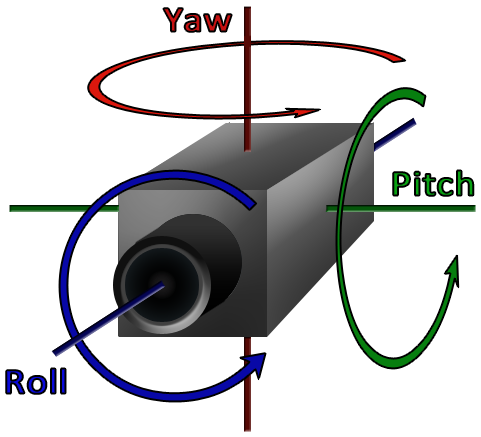
<style>
.page{position:relative;width:481px;height:437px;background:#ffffff}
.page>*{position:absolute;margin:0}
.t1{font:36px "Calibri";font-weight:bold;scale:1.1 1}
</style>
<div class="page">
<p class="t1" style="left:163px;top:8px;width:69px;height:24px">Yaw</p>
<p class="t1" style="left:393px;top:170px;width:81px;height:26px">Pitch</p>
<p class="t1" style="left:6px;top:368px;width:60px;height:26px">Roll</p>
</div>
